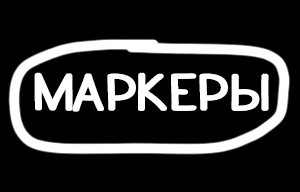
<style>
.page{position:relative;width:300px;height:192px;background:#000000}
.page>*{position:absolute;margin:0}
.t1{font:50px "HQYSaversText";letter-spacing:0.02em;color:#ffffff}
</style>
<div class="page">
<p class="t1" style="left:34px;top:72px;width:233px;height:40px">МАРКЕРЫ</p>
<p class="t1" style="left:36px;top:72px;width:233px;height:40px">МАРКЕРЫ</p>
</div>
